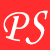
<style>
.page{position:relative;width:50px;height:50px;background:#ff2d2d}
.page>*{position:absolute;margin:0}
.t1{font:42px "MonotypeCorsiva";letter-spacing:0.025em;color:#ffffff;text-transform:uppercase}
</style>
<div class="page">
<p class="t1" style="left:3px;top:10px;width:45px;height:35px">ps</p>
</div>
